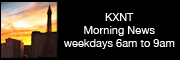
<style>
.page{position:relative;width:180px;height:60px;background:#000000}
.page>*{position:absolute;margin:0}
.t1{font:11px "HelveticaNeue";color:#ffffff}
</style>
<div class="page">
<p class="t1" style="left:63px;top:13px;width:112px;height:36px;text-align:center">KXNT<br>Morning News<br>weekdays 6am to 9am</p>
</div>
